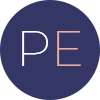
<style>
.page{position:relative;width:100px;height:100px;background:#343766}
.page>*{position:absolute;margin:0}
.t1{font:49.2px "Montserrat-ExtraLight";color:#ffffff}
.t2{font:49.2px "Montserrat-ExtraLight";color:#ebad9d}
</style>
<div class="page">
<p class="t1" style="left:22px;top:31px;width:59px;height:35px">P<span class="t2">E</span></p>
</div>
